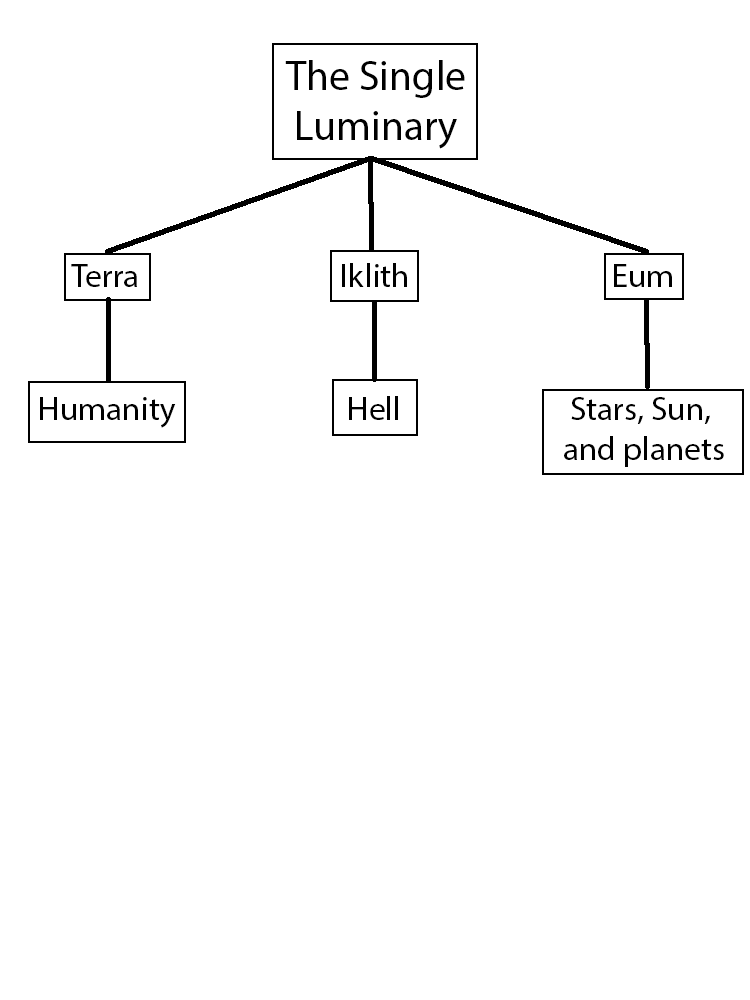
<style>
.page{position:relative;width:750px;height:1000px;background:#ffffff}
.page>*{position:absolute;margin:0}
.t1{font:41.7px "MyriadPro-Regular";color:#000000}
.t2{font:33.3px "MyriadPro-Regular";color:#000000}
</style>
<div class="page">
<p class="t1" style="left:285px;top:60px;width:180px;height:89px;text-align:center">The Single<br>Luminary</p>
<p class="t2" style="left:71px;top:264px;width:66px;height:23px">Terra</p>
<p class="t2" style="left:342px;top:263px;width:65px;height:24px">Iklith</p>
<p class="t2" style="left:614px;top:264px;width:58px;height:23px">Eum</p>
<p class="t2" style="left:40px;top:397px;width:136px;height:31px">Humanity</p>
<p class="t2" style="left:349px;top:396px;width:49px;height:24px">Hell</p>
<p class="t2" style="left:564px;top:397px;width:160px;height:70px;text-align:center">Stars, Sun, <br>and planets</p>
</div>
